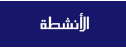
<style>
.page{position:relative;width:126px;height:48px;background:#16166b}
.page>*{position:absolute;margin:0}
.t1{font:20.4px "SC_KHALID";color:#ffffff;scale:0.9 1}
</style>
<div class="page">
<p class="t1" style="left:40px;top:13px;width:49px;height:19px">الأنشطة</p>
</div>
